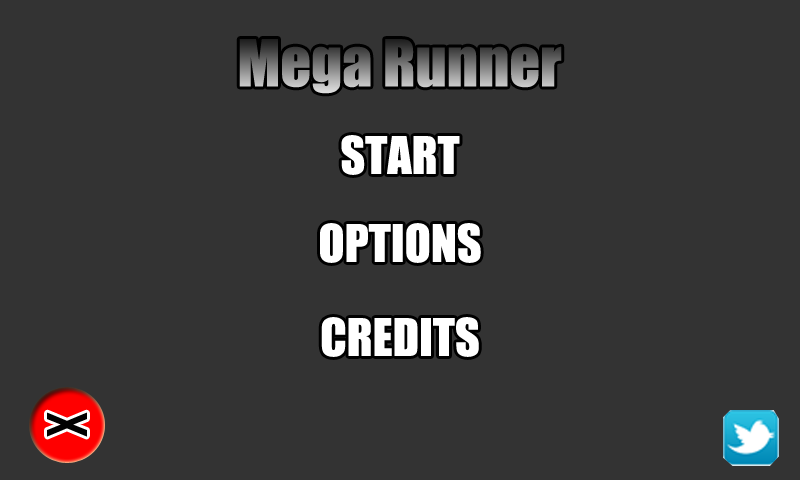
<style>
.page{position:relative;width:800px;height:480px;background:#333333}
.page>*{position:absolute;margin:0}
.t1{font:60px "Impact"}
.t2{font:48px "Impact";color:#ffffff;text-transform:uppercase}
.t3{font:48px "Impact";letter-spacing:-0.18em;color:#010101;text-transform:uppercase}
.t4{font:48px "Impact";letter-spacing:-0.24em;color:#010101;text-transform:uppercase}
</style>
<div class="page">
<p class="t1" style="left:239px;top:39px;width:323px;height:55px">Mega Runner</p>
<p class="t2" style="left:341px;top:135px;width:119px;height:40px">Start</p>
<p class="t2" style="left:320px;top:223px;width:161px;height:40px">Options</p>
<p class="t2" style="left:321px;top:317px;width:158px;height:40px">Credits</p>
<p class="t3" style="left:47px;top:412px;width:40px;height:25px">&gt;<span class="t4">&lt;</span></p>
</div>
